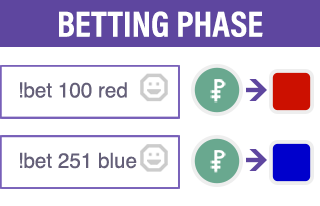
<style>
.page{position:relative;width:320px;height:206px;background:#ffffff}
.page>*{position:absolute;margin:0}
.t1{font:36.3px "AcuminProCond-Bold";color:#ffffff;text-transform:uppercase}
.t2{font:20.6px "Helvetica";color:#645f78}
</style>
<div class="page">
<p class="t1" style="left:59px;top:11px;width:204px;height:26px">Betting Phase</p>
<p class="t2" style="left:20px;top:82px;width:107px;height:16px">!bet 100 red</p>
<p class="t2" style="left:20px;top:152px;width:117px;height:17px">!bet 251 blue</p>
</div>
